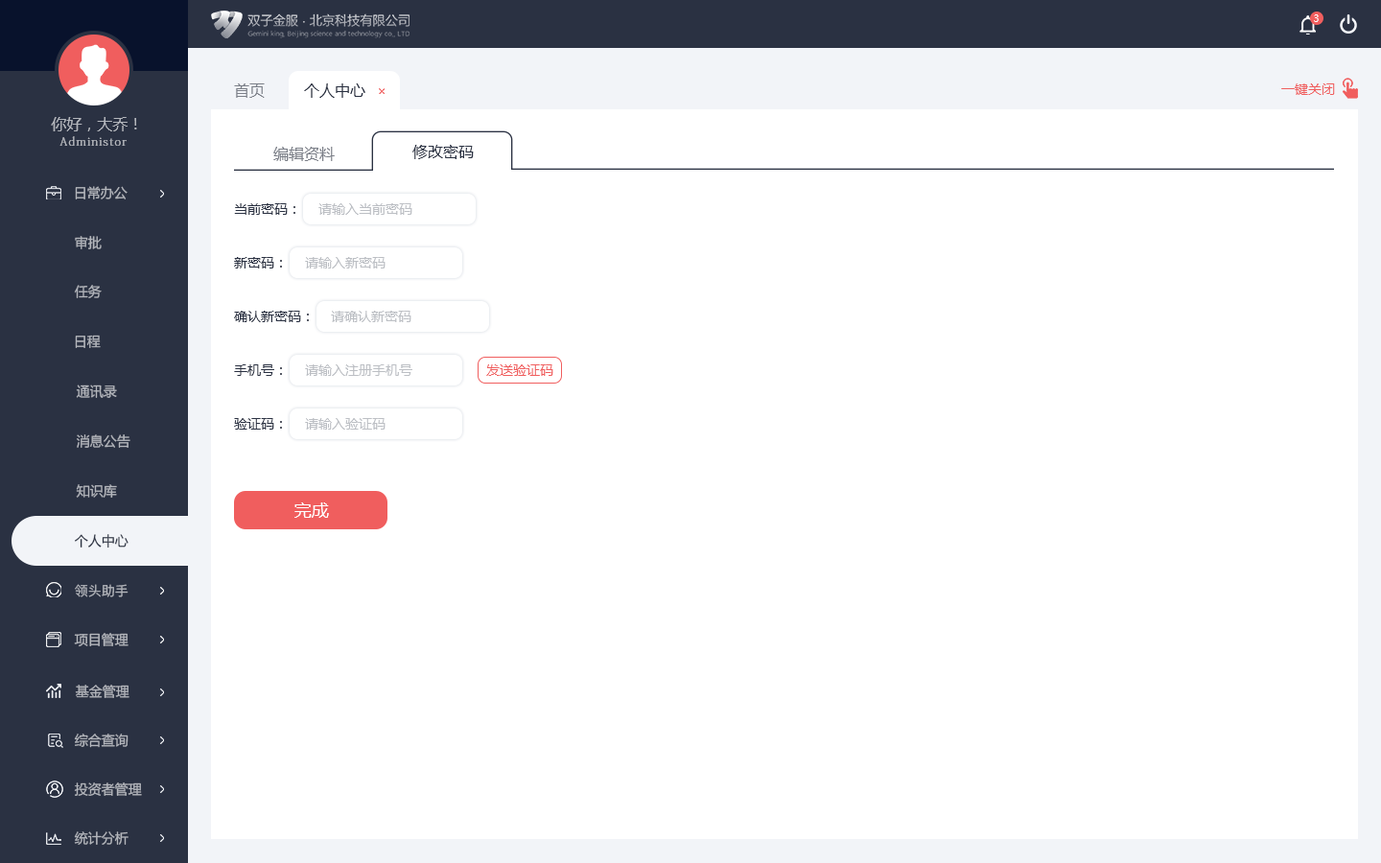
<style>
.page{position:relative;width:1381px;height:863px;background:#ffffff}
.page>*{position:absolute;margin:0}
.t1{font:9.6px "MicrosoftYaHeiUI";color:#ffffff}
.t2{font:15.3px "MicrosoftYaHeiMono";color:#7b7f88}
.t3{font:15.3px "MicrosoftYaHeiMono";color:#2a3142}
.t4{font:13.4px "MicrosoftYaHeiMono";color:#f05e5e}
.t5{font:15.3px "MicrosoftYaHeiMono";color:#b4b7bd}
.t6{font:11.5px "AdobeFangsongStd-Regular";letter-spacing:0.1em;color:#b4b7bd}
.t7{font:15.3px "MicrosoftYaHeiUI";color:#7b7f88}
.t8{font:15.3px "MicrosoftYaHeiUI";color:#2a3142}
.t9{font:13.4px "MicrosoftYaHeiUI";color:#b4b7bd}
.t10{font:13.4px "MicrosoftYaHeiUI";color:#2a3142}
.t11{font:13.4px "MicrosoftYaHeiUI";color:#bcbfc4}
.t12{font:13.4px "MicrosoftYaHeiUI";color:#f05e5e}
.t13{font:17.3px "MicrosoftYaHeiUI";color:#ffffff}
.t14{font:13.4px "PingFang-SC-Medium";color:#b4b7bd}
</style>
<div class="page">
<p class="t1" style="left:1314px;top:14px;width:5px;height:8px">3</p>
<p class="t2" style="left:234px;top:83px;width:31px;height:15px">首页</p>
<p class="t3" style="left:304px;top:83px;width:61px;height:15px">个人中心</p>
<p class="t4" style="left:1282px;top:83px;width:53px;height:12px">一键关闭</p>
<p class="t5" style="left:51px;top:117px;width:86px;height:14px">你好，大乔！</p>
<p class="t6" style="left:59px;top:136px;width:68px;height:10px">Administor</p>
<p class="t7" style="left:273px;top:147px;width:62px;height:14px">编辑资料</p>
<p class="t8" style="left:412px;top:145px;width:62px;height:14px">修改密码</p>
<p class="t9" style="left:75px;top:186px;width:53px;height:14px">日常办公</p>
<p class="t10" style="left:234px;top:203px;width:61px;height:12px">当前密码：</p>
<p class="t11" style="left:318px;top:203px;width:94px;height:12px">请输入当前密码</p>
<p class="t9" style="left:75px;top:236px;width:27px;height:13px">审批</p>
<p class="t10" style="left:234px;top:257px;width:48px;height:12px">新密码：</p>
<p class="t11" style="left:305px;top:257px;width:81px;height:12px">请输入新密码</p>
<p class="t9" style="left:74px;top:285px;width:28px;height:13px">任务</p>
<p class="t10" style="left:234px;top:311px;width:75px;height:11px">确认新密码：</p>
<p class="t11" style="left:331px;top:311px;width:81px;height:11px">请确认新密码</p>
<p class="t9" style="left:75px;top:335px;width:26px;height:13px">日程</p>
<p class="t10" style="left:234px;top:365px;width:48px;height:11px">手机号：</p>
<p class="t11" style="left:305px;top:365px;width:107px;height:11px">请输入注册手机号</p>
<p class="t12" style="left:486px;top:365px;width:67px;height:11px">发送验证码</p>
<p class="t9" style="left:76px;top:385px;width:41px;height:13px">通讯录</p>
<p class="t10" style="left:234px;top:418px;width:48px;height:12px">验证码：</p>
<p class="t11" style="left:305px;top:418px;width:81px;height:12px">请输入验证码</p>
<p class="t9" style="left:77px;top:435px;width:53px;height:13px">消息公告</p>
<p class="t9" style="left:76px;top:484px;width:41px;height:14px">知识库</p>
<p class="t13" style="left:294px;top:503px;width:35px;height:15px">完成</p>
<p class="t10" style="left:75px;top:534px;width:54px;height:15px">个人中心</p>
<p class="t14" style="left:75px;top:584px;width:54px;height:14px">领头助手</p>
<p class="t9" style="left:74px;top:633px;width:55px;height:14px">项目管理</p>
<p class="t9" style="left:75px;top:685px;width:54px;height:13px">基金管理</p>
<p class="t9" style="left:74px;top:734px;width:55px;height:14px">综合查询</p>
<p class="t9" style="left:74px;top:783px;width:68px;height:13px">投资者管理</p>
<p class="t9" style="left:74px;top:832px;width:55px;height:13px">统计分析</p>
</div>
